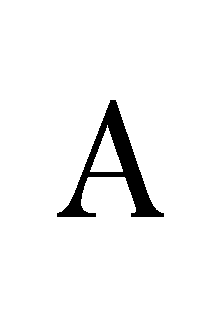
<style>
.page{position:relative;width:222px;height:323px;background:#ffffff}
.page>*{position:absolute;margin:0}
.t1{font:180px "FootlightMTLight";color:#000000}
</style>
<div class="page">
<p class="t1" style="left:57px;top:100px;width:107px;height:117px">A</p>
</div>
